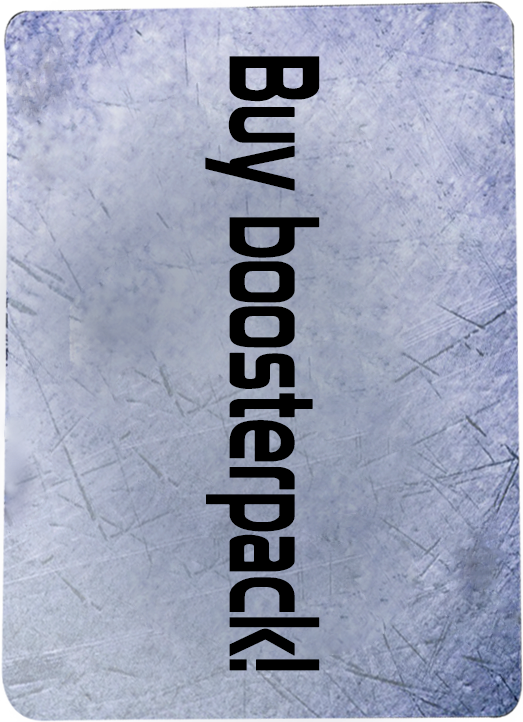
<style>
.page{position:relative;width:523px;height:722px}
.page>*{position:absolute;margin:0}
.t1{font:125px "Prototype";color:#000000;scale:0.64 1}
</style>
<div class="page">
<p class="t1" style="left:205px;top:56px;width:115px;height:615px;rotate:90deg">Buy boosterpack!</p>
</div>
